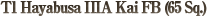
<style>
.page{position:relative;width:207px;height:16px;background:#ffffff}
.page>*{position:absolute;margin:0}
.t1{font:16px "RyuminPro-ExBold";letter-spacing:-0.08em;color:#4a3f32;font-weight:bold;scale:0.88 1}
</style>
<div class="page">
<p class="t1" style="left:0px;top:0px;width:207px;height:17px">T1 Hayabusa IIIA Kai FB (65 Sq.)</p>
</div>
